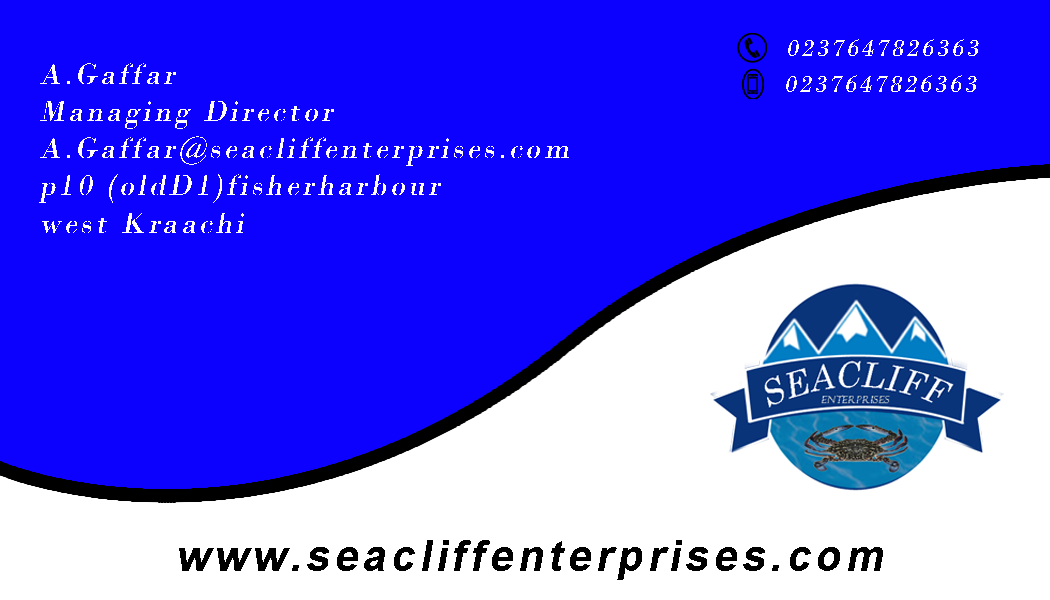
<style>
.page{position:relative;width:1050px;height:600px;background:#0c00ff}
.page>*{position:absolute;margin:0}
.t1{font:25.4px "BodoniMT";letter-spacing:0.1em;color:#fffdfd;font-style:italic}
.t2{font:31px "BodoniMT";letter-spacing:0.1em;color:#fffdfd;font-style:italic}
.t3{font:43.2px "Arial-BoldMT";letter-spacing:0.1em;color:#000000;font-style:italic}
</style>
<div class="page">
<p class="t1" style="left:788px;top:39px;width:191px;height:17px">0237647826363</p>
<p class="t2" style="left:39px;top:63px;width:530px;height:170px">A.Gaffar<br>Managing Director<br>A.Gaffar@seacliffenterprises.com<br>p10 (oldD1)fisherharbour <br>west Kraachi</p>
<p class="t1" style="left:786px;top:75px;width:191px;height:17px">0237647826363</p>
<p class="t3" style="left:179px;top:540px;width:704px;height:40px">www.seacliffenterprises.com</p>
</div>
